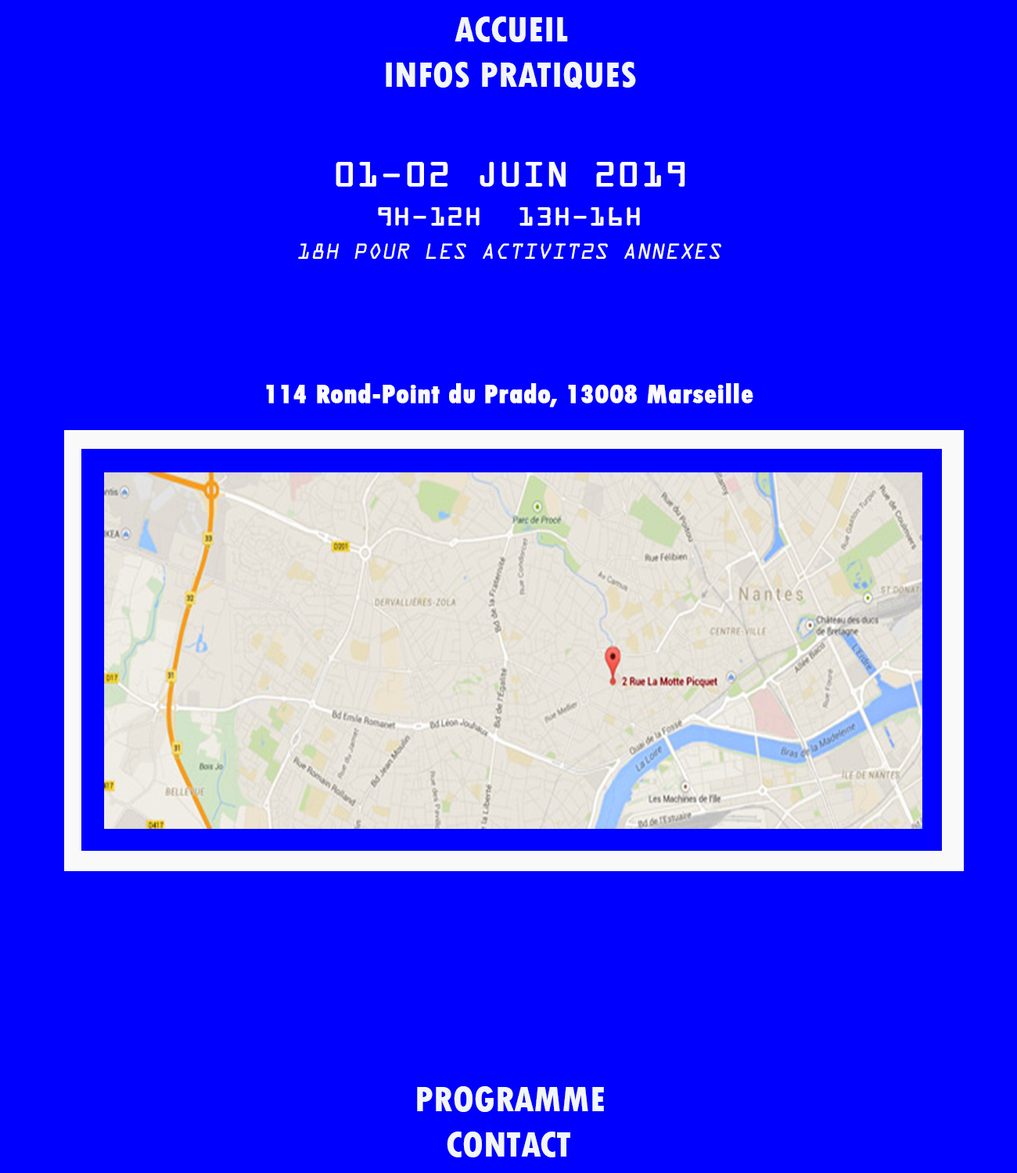
<style>
.page{position:relative;width:1017px;height:1173px;background:#0000ff}
.page>*{position:absolute;margin:0}
.t1{font:37.5px "TwCenMT-CondensedExtraBold";color:#f2f6f6}
.t2{font:37.5px "OCRAExtended";color:#fbfbfe;font-weight:bold}
.t3{font:28.2px "OCRAExtended";color:#fbfbfe;font-weight:bold}
.t4{font:23.5px "OCRAExtended";color:#fbfbfe;font-style:italic}
.t5{font:28.2px "TwCenMT-CondensedExtraBold";color:#fbfbfe;font-weight:bold}
</style>
<div class="page">
<p class="t1" style="left:454px;top:16px;width:114px;height:26px">ACCUEIL</p>
<p class="t1" style="left:386px;top:62px;width:250px;height:27px">INFOS PRATIQUES</p>
<p class="t2" style="left:335px;top:162px;width:350px;height:25px">01-02 JUIN 2019</p>
<p class="t3" style="left:378px;top:207px;width:262px;height:19px">9H-12H  13H-16H</p>
<p class="t4" style="left:298px;top:243px;width:423px;height:16px">18H POUR LES ACTIVIT2S ANNEXES</p>
<p class="t5" style="left:266px;top:383px;width:487px;height:24px">114 Rond-Point du Prado, 13008 Marseille</p>
<p class="t1" style="left:417px;top:1086px;width:187px;height:26px">PROGRAMME</p>
<p class="t1" style="left:447px;top:1132px;width:123px;height:25px">CONTACT</p>
</div>
